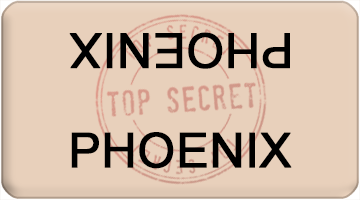
<style>
.page{position:relative;width:360px;height:200px;background:#e8d0bb}
.page>*{position:absolute;margin:0}
.t1{font:48px "ArialMT";color:#000000;font-weight:bold}
</style>
<div class="page">
<p class="t1" style="left:69px;top:32px;width:221px;height:37px;rotate:180deg">PHOENIX</p>
<p class="t1" style="left:71px;top:132px;width:221px;height:37px">PHOENIX</p>
</div>
